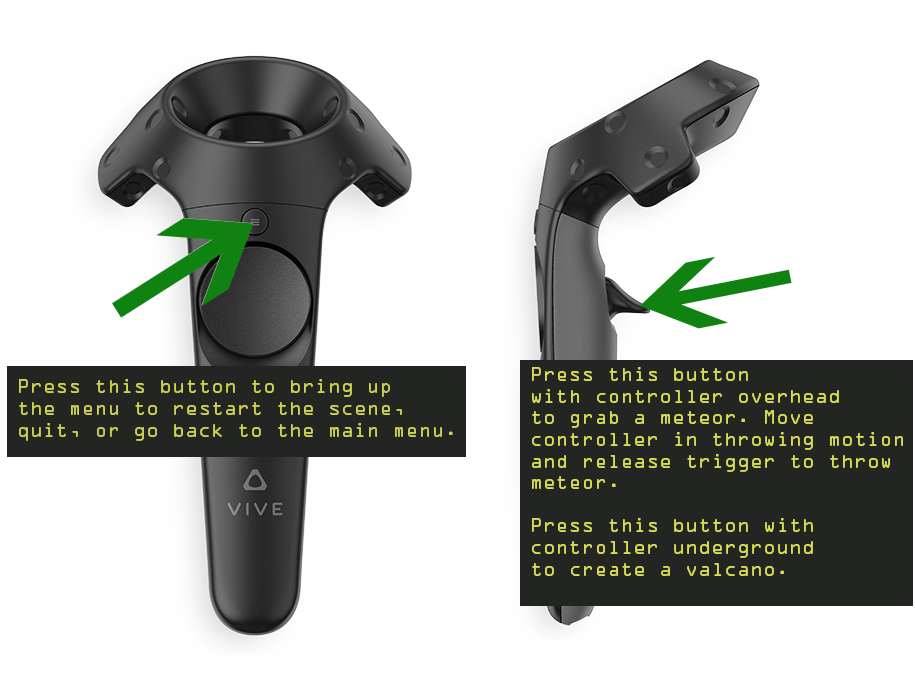
<style>
.page{position:relative;width:915px;height:696px;background:#ffffff}
.page>*{position:absolute;margin:0}
.t1{font:18px "OCRAStd";color:#d9db53}
.t2{font:18px "OCRAStd";color:#ced050}
</style>
<div class="page">
<p class="t1" style="left:532px;top:367px;width:371px;height:209px">Press this button<br>with controller overhead<br>to grab a meteor. Move<br>controller in throwing motion<br>and release trigger to throw<br>meteor.<br><br>Press this button with<br>controller underground<br>to create a valcano.</p>
<p class="t2" style="left:19px;top:379px;width:434px;height:62px">Press this button to bring up <br>the menu to restart the scene,<br>quit, or go back to the main menu.</p>
</div>
